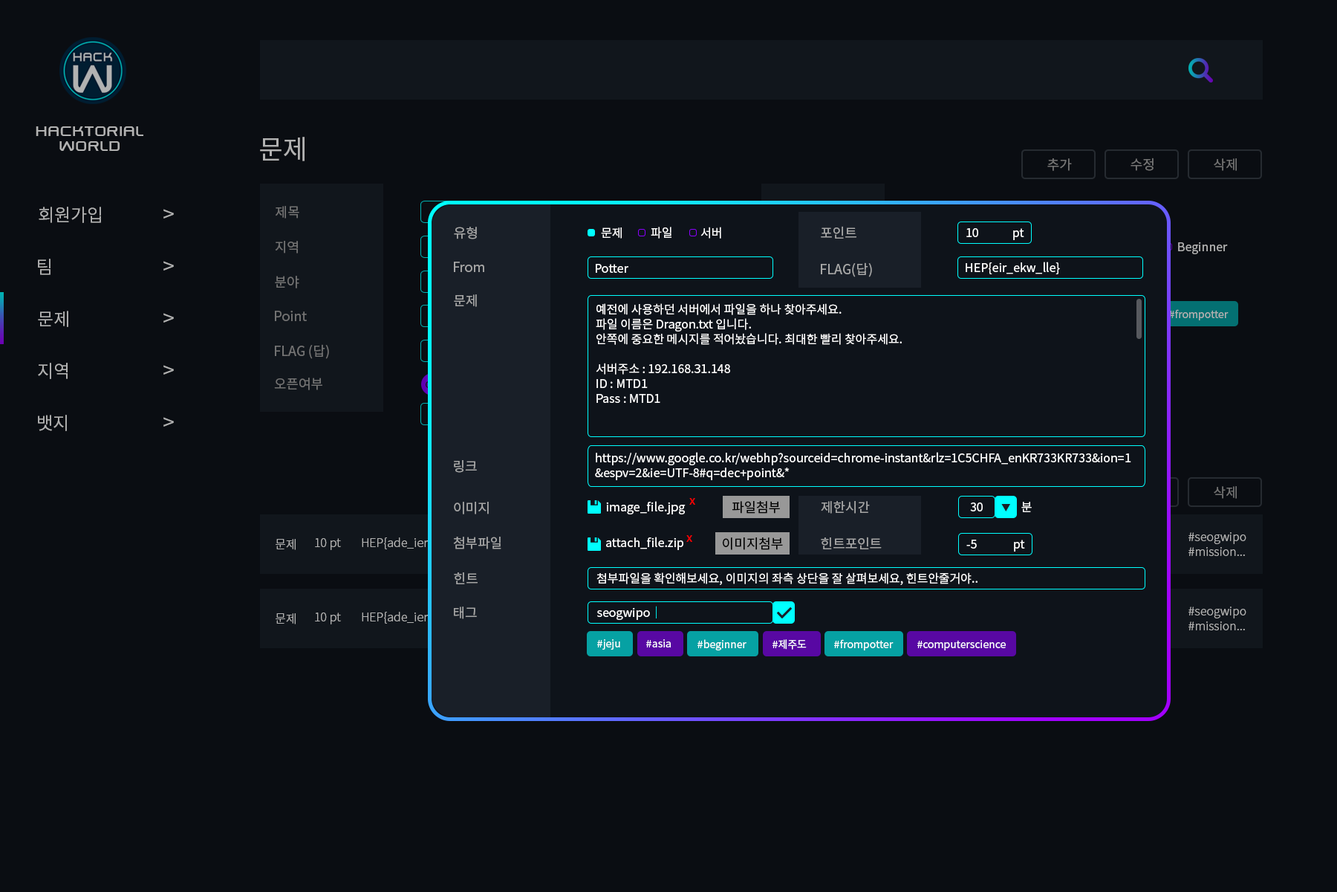
<style>
.page{position:relative;width:1337px;height:892px;background:#0a0d12}
.page>*{position:absolute;margin:0}
.t1{font:17.8px/14.9px "SwiszRegular";color:#b2b2b2}
.t2{font:26.7px "NotoSansCJKkr-Regular";color:#b2b2b2}
.t3{font:13.4px "NotoSansCJKkr-Regular";color:#747474}
.t4{font:13.4px "NotoSansCJKkr-Regular";color:#727272}
.t5{font:17.8px "NotoSansCJKkr-Regular";color:#b2b2b2}
.t6{font:20.8px "NotoSansCJKkr-Regular";color:#b2b2b2}
.t7{font:13.4px "NotoSansCJKkr-Regular";color:#a6a6a6}
.t8{font:11.9px "NotoSansCJKkr-Regular";color:#ffffff}
.t9{font:11.9px "NotoSansCJKkr-Regular";color:#b2b2b2}
.t10{font:11.9px/14.9px "NotoSansCJKkr-Regular";color:#ffffff}
.t11{font:10.4px "NotoSansCJKkr-Regular";color:#b2b2b2}
.t12{font:11.9px "NotoSansCJKkr-Regular";color:#ff0000}
.t13{font:13.4px "NotoSansCJKkr-Regular";color:#000000}
.t14{font:8.9px "NotoSansCJKkr-Regular";color:#191f28}
.t15{font:11.9px/14.9px "NotoSansCJKkr-Light";color:#b2b2b2}
.t16{font:11.9px "NotoSansCJKkr-Light";color:#b2b2b2}
.t17{font:11.9px "NotoSansCJKkr-Regular";color:#00ffff}
.t18{font:10.4px "NotoSansCJKkr-Regular";color:#ffffff}
</style>
<div class="page">
<p class="t1" style="left:36px;top:126px;width:107px;height:25px;text-align:center">hacktorial<br>world</p>
<p class="t2" style="left:260px;top:137px;width:45px;height:24px">문제</p>
<p class="t3" style="left:1048px;top:158px;width:24px;height:13px">추가</p>
<p class="t3" style="left:1131px;top:158px;width:23px;height:13px">수정</p>
<p class="t4" style="left:1214px;top:158px;width:23px;height:13px">삭제</p>
<p class="t5" style="left:39px;top:207px;width:62px;height:16px">회원가입</p>
<p class="t6" style="left:163px;top:209px;width:11px;height:9px">&gt;</p>
<p class="t4" style="left:276px;top:206px;width:23px;height:12px">제목</p>
<p class="t7" style="left:454px;top:227px;width:23px;height:12px">유형</p>
<p class="t8" style="left:601px;top:227px;width:21px;height:12px">문제</p>
<p class="t8" style="left:651px;top:227px;width:21px;height:12px">파일</p>
<p class="t8" style="left:701px;top:227px;width:20px;height:12px">서버</p>
<p class="t7" style="left:821px;top:226px;width:36px;height:13px">포인트</p>
<p class="t8" style="left:967px;top:228px;width:12px;height:9px">10</p>
<p class="t8" style="left:1013px;top:228px;width:12px;height:12px">pt</p>
<p class="t4" style="left:275px;top:241px;width:23px;height:12px">지역</p>
<p class="t9" style="left:1178px;top:241px;width:50px;height:13px">Beginner</p>
<p class="t5" style="left:38px;top:259px;width:13px;height:16px">팀</p>
<p class="t6" style="left:163px;top:261px;width:11px;height:9px">&gt;</p>
<p class="t7" style="left:454px;top:262px;width:30px;height:10px">From</p>
<p class="t8" style="left:596px;top:264px;width:33px;height:9px">Potter</p>
<p class="t7" style="left:821px;top:262px;width:51px;height:15px">FLAG(답)</p>
<p class="t8" style="left:966px;top:262px;width:94px;height:12px">HEP{eir_ekw_lle}</p>
<p class="t4" style="left:275px;top:276px;width:24px;height:12px">분야</p>
<p class="t7" style="left:454px;top:294px;width:23px;height:13px">문제</p>
<p class="t10" style="left:596px;top:303px;width:306px;height:100px">예전에 사용하던 서버에서 파일을 하나 찾아주세요.<br>파일 이름은 Dragon.txt 입니다.<br>안쪽에 중요한 메시지를 적어놨습니다. 최대한 빨리 찾아주세요.<br><br>서버주소 : 192.168.31.148<br>ID : MTD1<br>Pass : MTD1</p>
<p class="t5" style="left:38px;top:311px;width:30px;height:16px">문제</p>
<p class="t6" style="left:163px;top:313px;width:11px;height:9px">&gt;</p>
<p class="t4" style="left:275px;top:311px;width:32px;height:10px">Point</p>
<p class="t11" style="left:1169px;top:309px;width:60px;height:11px">#frompotter</p>
<p class="t4" style="left:275px;top:344px;width:54px;height:15px">FLAG (답)</p>
<p class="t5" style="left:38px;top:363px;width:30px;height:16px">지역</p>
<p class="t6" style="left:163px;top:365px;width:11px;height:9px">&gt;</p>
<p class="t4" style="left:274px;top:377px;width:48px;height:13px">오픈여부</p>
<p class="t5" style="left:38px;top:415px;width:29px;height:16px">뱃지</p>
<p class="t6" style="left:163px;top:417px;width:11px;height:9px">&gt;</p>
<p class="t7" style="left:454px;top:460px;width:23px;height:13px">링크</p>
<p class="t10" style="left:595px;top:452px;width:537px;height:28px">https://www.google.co.kr/webhp?sourceid=chrome-instant&amp;rlz=1C5CHFA_enKR733KR733&amp;ion=1<br>&amp;espv=2&amp;ie=UTF-8#q=dec+point&amp;*</p>
<p class="t4" style="left:1214px;top:486px;width:23px;height:13px">삭제</p>
<p class="t12" style="left:690px;top:498px;width:5px;height:6px">x</p>
<p class="t7" style="left:454px;top:502px;width:35px;height:12px">이미지</p>
<p class="t8" style="left:606px;top:501px;width:80px;height:13px">image_file.jpg</p>
<p class="t13" style="left:732px;top:501px;width:48px;height:12px">파일첨부</p>
<p class="t7" style="left:821px;top:501px;width:49px;height:12px">제한시간</p>
<p class="t8" style="left:970px;top:502px;width:13px;height:9px">30</p>
<p class="t14" style="left:1002px;top:504px;width:8px;height:7px">▼</p>
<p class="t8" style="left:1022px;top:502px;width:10px;height:10px">분</p>
<p class="t15" style="left:1189px;top:532px;width:58px;height:24px">#seogwipo<br>#mission...</p>
<p class="t16" style="left:276px;top:539px;width:20px;height:11px">문제</p>
<p class="t16" style="left:315px;top:538px;width:26px;height:12px">10 pt</p>
<p class="t16" style="left:362px;top:537px;width:99px;height:13px">HEP{ade_ier_qwo}</p>
<p class="t7" style="left:453px;top:536px;width:49px;height:13px">첨부파일</p>
<p class="t8" style="left:606px;top:536px;width:78px;height:14px">attach_file.zip</p>
<p class="t12" style="left:687px;top:535px;width:5px;height:7px">x</p>
<p class="t13" style="left:723px;top:537px;width:60px;height:13px">이미지첨부</p>
<p class="t7" style="left:821px;top:536px;width:61px;height:13px">힌트포인트</p>
<p class="t8" style="left:967px;top:539px;width:10px;height:9px">-5</p>
<p class="t8" style="left:1014px;top:539px;width:11px;height:12px">pt</p>
<p class="t7" style="left:454px;top:572px;width:24px;height:12px">힌트</p>
<p class="t8" style="left:597px;top:572px;width:381px;height:13px">첨부파일을 확인해보세요, 이미지의 좌측 상단을 잘 살펴보세요, 힌트안줄거야..</p>
<p class="t8" style="left:597px;top:606px;width:60px;height:14px">seogwipo<span class="t17">｜</span></p>
<p class="t16" style="left:276px;top:613px;width:20px;height:11px">문제</p>
<p class="t16" style="left:315px;top:612px;width:26px;height:12px">10 pt</p>
<p class="t16" style="left:362px;top:611px;width:99px;height:13px">HEP{ade_ier_qwo}</p>
<p class="t7" style="left:454px;top:606px;width:23px;height:13px">태그</p>
<p class="t15" style="left:1189px;top:606px;width:58px;height:24px">#seogwipo<br>#mission...</p>
<p class="t18" style="left:597px;top:639px;width:23px;height:10px">#jeju</p>
<p class="t18" style="left:646px;top:639px;width:25px;height:8px">#asia</p>
<p class="t18" style="left:698px;top:639px;width:49px;height:11px">#beginner</p>
<p class="t18" style="left:773px;top:639px;width:34px;height:10px">#제주도</p>
<p class="t18" style="left:834px;top:639px;width:60px;height:11px">#frompotter</p>
<p class="t18" style="left:918px;top:640px;width:88px;height:10px">#computerscience</p>
</div>
